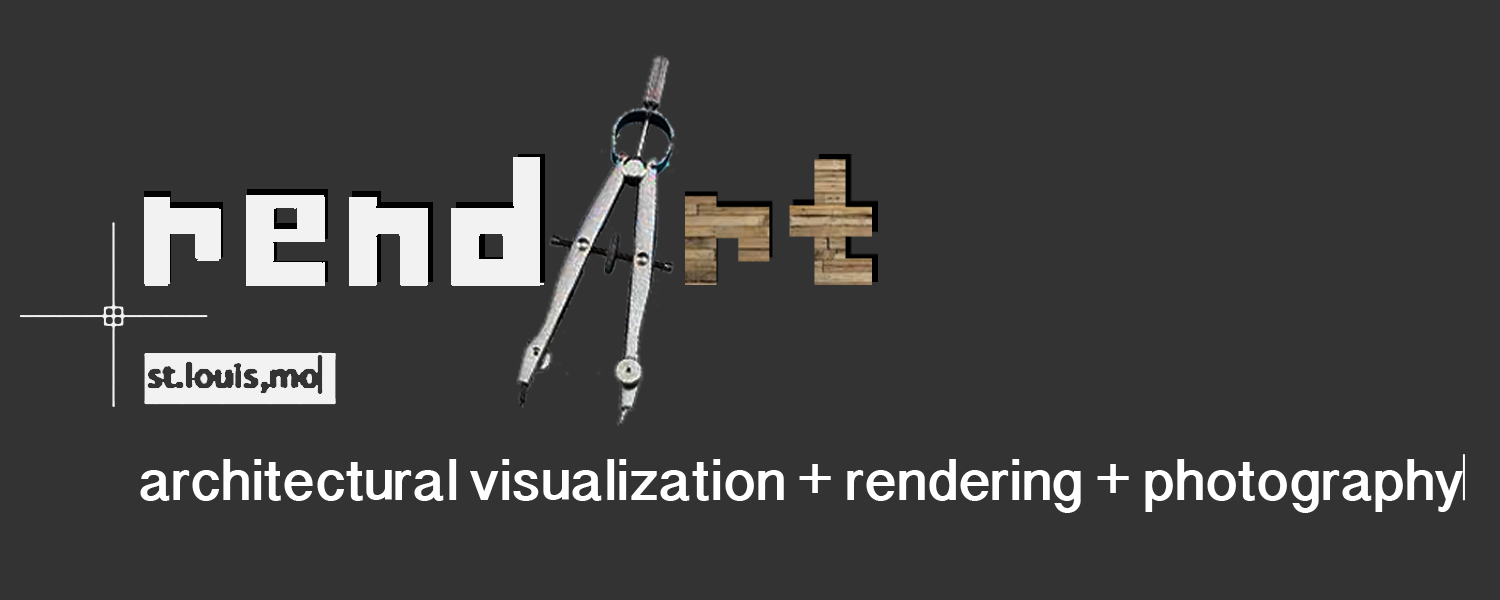
<style>
.page{position:relative;width:1500px;height:600px;background:#333333}
.page>*{position:absolute;margin:0}
.t1{font:58.3px "DevanagariSangamMN-Bold";color:#ffffff}
</style>
<div class="page">
<p class="t1" style="left:140px;top:459px;width:1323px;height:54px">architectural visualization + rendering + photography</p>
</div>
